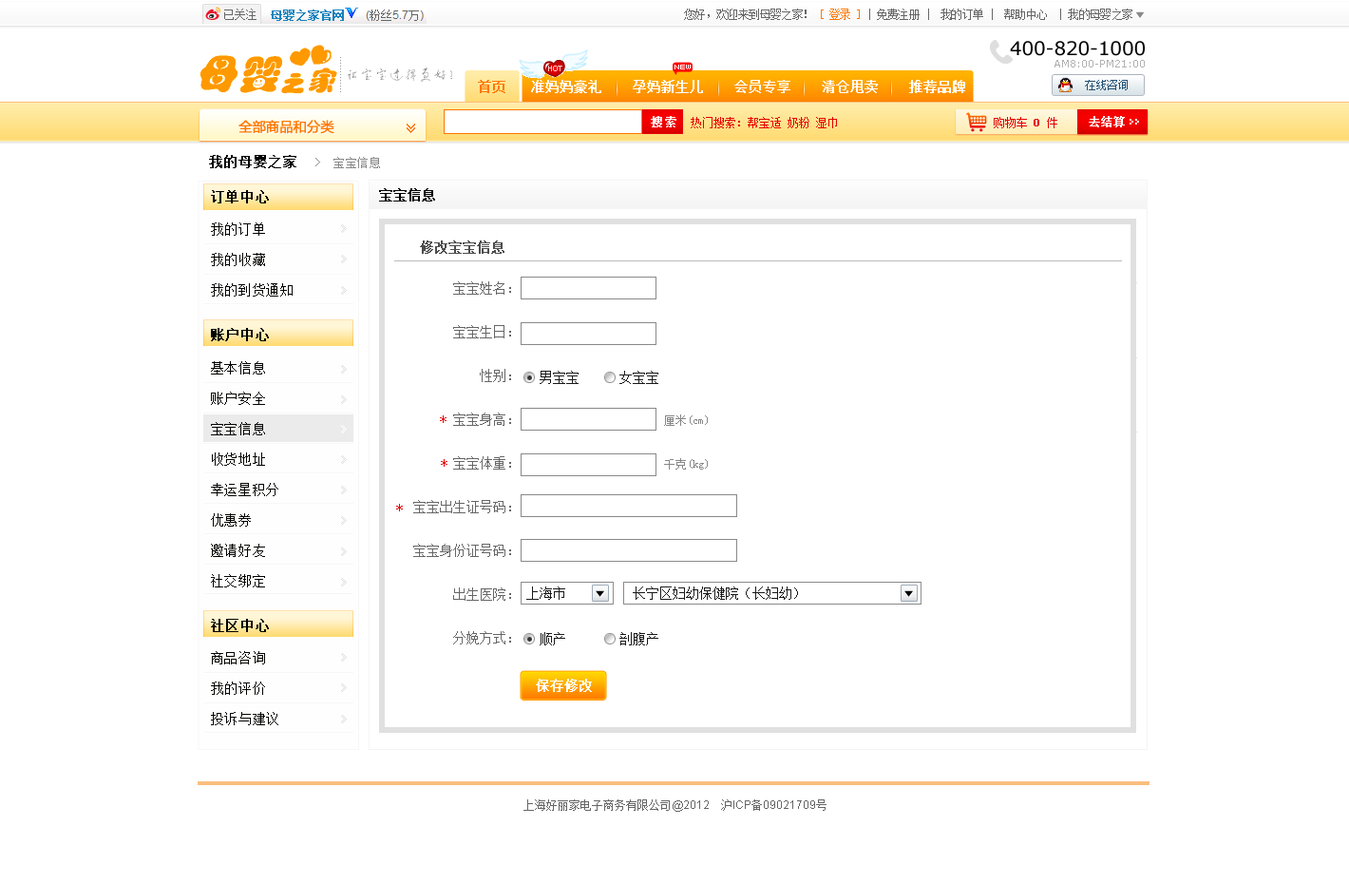
<style>
.page{position:relative;width:1349px;height:884px;background:#ffffff}
.page>*{position:absolute;margin:0}
.t1{font:11.4px "SimSun";letter-spacing:-0.05em;color:#666666}
.t2{font:11.4px "SimSun";letter-spacing:-0.05em;color:#ff7800}
.t3{font:19px "Verdana";letter-spacing:-0.01em;color:#000000}
.t4{font:5.7px "04b08";color:#ffffff}
.t5{font:10.5px "Verdana";color:#b1b1b1}
.t6{font:13.3px "SimSun";color:#ff7800;font-weight:bold}
.t7{font:13.3px "SimSun";color:#ffffff;font-weight:bold}
.t8{font:13.3px "MicrosoftYaHei";color:#ff7800;font-weight:bold}
.t9{font:11.4px "SimSun";color:#ff7800;font-weight:bold}
.t10{font:11.4px "SimSun";letter-spacing:0.2em;color:#ffffff;font-weight:bold}
.t11{font:11.4px "SimSun";color:#e60000}
.t12{font:11.4px "SimSun";color:#e60000;font-weight:bold}
.t13{font:11.4px "SimSun";color:#ffffff;font-weight:bold}
.t14{font:11.4px "SimSun";letter-spacing:0.05em;color:#898989}
.t15{font:13.3px "SimSun";letter-spacing:0.05em;color:#000000;font-weight:bold}
.t16{font:13.3px "SimSun";color:#000000;font-weight:bold}
.t17{font:13.3px/30.4px "SimSun";letter-spacing:0.05em;color:#020300}
.t18{font:13.3px "SimSun";color:#4d4d4d;font-weight:bold}
.t19{font:13.3px/43.7px "SimSun";color:#666666}
.t20{font:13.3px "SimSun";letter-spacing:0.05em;color:#020300;font-weight:bold}
.t21{font:13.3px "SimSun";color:#1a1a1a}
.t22{font:13.3px "SimSun";color:#d00000}
.t23{font:11.4px/43.7px "SimSun";color:#878787}
.t24{font:11.4px "SimSun";color:#666666}
.t25{font:11.4px "ArialMT";color:#666666}
</style>
<div class="page">
<p class="t1" style="left:684px;top:9px;width:449px;height:11px">您好，欢迎来到母婴之家！ <span class="t2">[ 登录 ]</span> | 免费注册 |  我的订单 |  帮助中心  | 我的母婴之家</p>
<p class="t3" style="left:1010px;top:41px;width:135px;height:15px">400-820-1000</p>
<p class="t4" style="left:675px;top:65px;width:16px;height:4px">NEW</p>
<p class="t5" style="left:1055px;top:60px;width:90px;height:7px">AM8:00-PM21:00</p>
<p class="t6" style="left:478px;top:80px;width:28px;height:13px">首页</p>
<p class="t7" style="left:531px;top:80px;width:434px;height:13px">准妈妈豪礼    孕妈新生儿    会员专享    清仓甩卖    推荐品牌</p>
<p class="t8" style="left:239px;top:120px;width:95px;height:14px">全部商品和分类</p>
<p class="t9" style="left:407px;top:124px;width:8px;height:5px;rotate:90deg">&gt;</p>
<p class="t10" style="left:651px;top:116px;width:26px;height:11px">搜索</p>
<p class="t11" style="left:691px;top:117px;width:146px;height:11px">热门搜索：帮宝适 奶粉 湿巾</p>
<p class="t11" style="left:994px;top:117px;width:64px;height:11px">购物车 <span class="t12">0 </span>件</p>
<p class="t13" style="left:1089px;top:116px;width:36px;height:11px">去结算</p>
<p class="t9" style="left:407px;top:127px;width:8px;height:6px;rotate:90deg">&gt;</p>
<p class="t14" style="left:209px;top:155px;width:171px;height:13px"><span class="t15">我的母婴之家  </span>&gt;  宝宝信息</p>
<p class="t15" style="left:211px;top:190px;width:58px;height:13px">订单中心</p>
<p class="t16" style="left:379px;top:188px;width:56px;height:13px">宝宝信息</p>
<p class="t17" style="left:211px;top:222px;width:82px;height:74px">我的订单<br>我的收藏<br>我的到货通知</p>
<p class="t18" style="left:420px;top:240px;width:85px;height:14px">修改宝宝信息</p>
<p class="t19" style="left:413px;top:281px;width:98px;height:363px;text-align:right">宝宝姓名：<br>宝宝生日：<br>性别：<br>宝宝身高：<br>宝宝体重：<br>宝宝出生证号码：<br>宝宝身份证号码：<br>出生医院：<br>分娩方式：</p>
<p class="t20" style="left:211px;top:328px;width:58px;height:13px">账户中心</p>
<p class="t17" style="left:211px;top:361px;width:67px;height:226px">基本信息<br>账户安全<br>宝宝信息<br>收货地址<br>幸运星积分<br>优惠券<br>邀请好友<br>社交绑定</p>
<p class="t21" style="left:540px;top:371px;width:119px;height:13px">男宝宝      女宝宝</p>
<p class="t22" style="left:440px;top:415px;width:7px;height:8px">*</p>
<p class="t23" style="left:664px;top:414px;width:44px;height:55px">厘米(cm)<br>千克(kg)</p>
<p class="t22" style="left:441px;top:459px;width:7px;height:8px">*</p>
<p class="t22" style="left:396px;top:504px;width:7px;height:7px">*</p>
<p class="t21" style="left:526px;top:586px;width:272px;height:14px">上海市          长宁区妇幼保健院（长妇幼）</p>
<p class="t15" style="left:211px;top:619px;width:58px;height:13px">社区中心</p>
<p class="t21" style="left:540px;top:632px;width:119px;height:13px">顺产        剖腹产</p>
<p class="t17" style="left:211px;top:651px;width:67px;height:74px">商品咨询<br>我的评价<br>投诉与建议</p>
<p class="t7" style="left:536px;top:678px;width:56px;height:14px">保存修改</p>
<p class="t24" style="left:524px;top:799px;width:303px;height:13px">上海好丽家电子商务有限公司<span class="t25">@2012    </span>沪<span class="t25">ICP</span>备<span class="t25">09021709</span>号</p>
</div>
